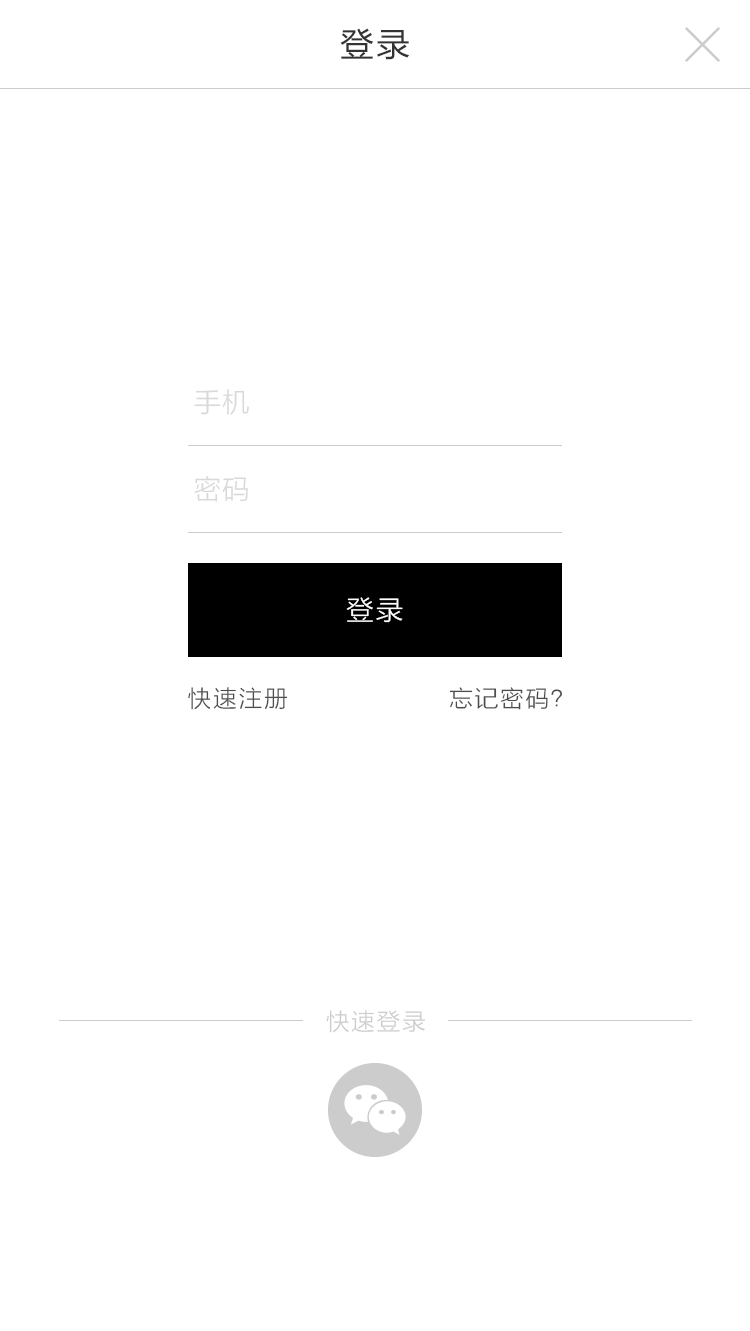
<style>
.page{position:relative;width:750px;height:1331px;background:#ffffff}
.page>*{position:absolute;margin:0}
.t1{font:34px "FZLTHK--GBK1-0";letter-spacing:0.06em;color:#333333}
.t2{font:28px "FZLTXIHK--GBK1-0";letter-spacing:0.02em;color:#d9d9d9}
.t3{font:28px "FZLTXIHK--GBK1-0";letter-spacing:0.06em;color:#ffffff}
.t4{font:24px "FZLTXIHK--GBK1-0";letter-spacing:0.06em;color:#4d4d4d}
.t5{font:24px "FZLTXIHK--GBK1-0";letter-spacing:0.06em;color:#cccccc}
</style>
<div class="page">
<p class="t1" style="left:340px;top:28px;width:70px;height:32px">登录</p>
<p class="t2" style="left:194px;top:389px;width:55px;height:26px">手机</p>
<p class="t2" style="left:194px;top:476px;width:54px;height:26px">密码</p>
<p class="t3" style="left:346px;top:597px;width:57px;height:26px">登录</p>
<p class="t4" style="left:188px;top:687px;width:100px;height:23px">快速注册</p>
<p class="t4" style="left:449px;top:687px;width:113px;height:23px">忘记密码？</p>
<p class="t5" style="left:326px;top:1010px;width:99px;height:23px">快速登录</p>
</div>
